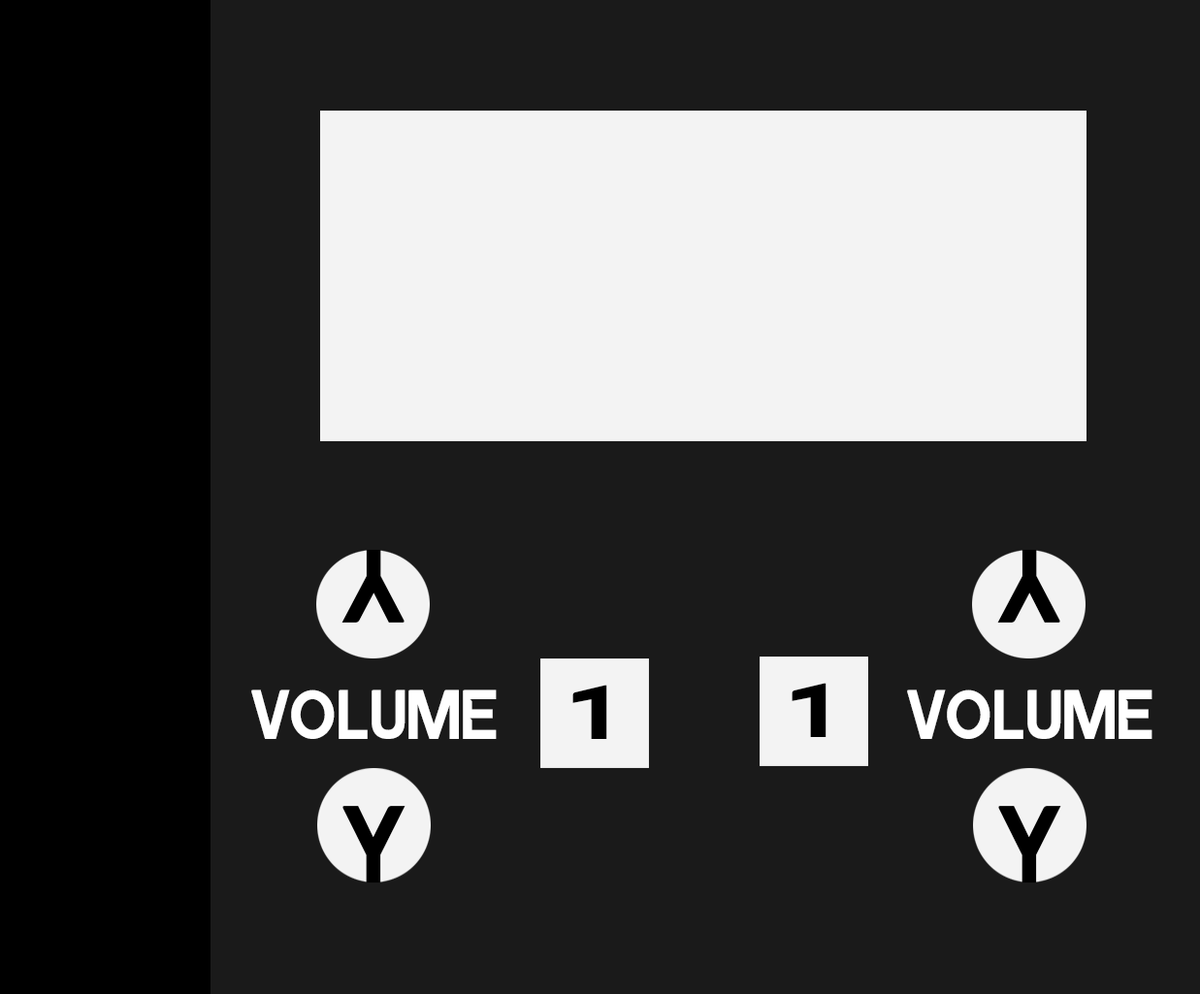
<style>
.page{position:relative;width:1200px;height:994px;background:#1a1a1a}
.page>*{position:absolute;margin:0}
.t1{font:103.8px "ALISEORegular";color:#000000;scale:1.05 1}
.t2{font:69.8px "ALISEORegular";color:#ffffff}
.t3{font:76.6px "ALISEORegular";color:#000000;scale:1.51 1}
.t4{font:109.3px "ALISEORegular";color:#000000}
</style>
<div class="page">
<p class="t1" style="left:341px;top:549px;width:63px;height:74px;rotate:180deg">y</p>
<p class="t1" style="left:997px;top:549px;width:63px;height:74px;rotate:180deg">y</p>
<p class="t2" style="left:251px;top:690px;width:246px;height:49px">VOLUME</p>
<p class="t3" style="left:572px;top:685px;width:35px;height:54px">1</p>
<p class="t3" style="left:791px;top:683px;width:35px;height:54px">1</p>
<p class="t2" style="left:907px;top:690px;width:245px;height:49px">VOLUME</p>
<p class="t4" style="left:342px;top:806px;width:63px;height:77px">y</p>
<p class="t4" style="left:998px;top:806px;width:63px;height:77px">y</p>
</div>
